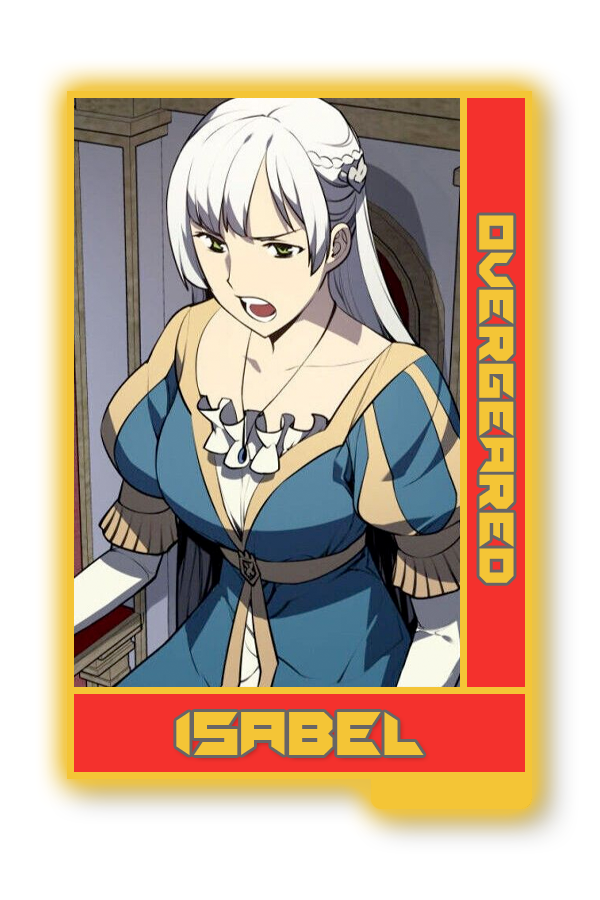
<style>
.page{position:relative;width:600px;height:900px;background:#ffffff}
.page>*{position:absolute;margin:0}
.t1{font:48.8px "Suggested-Regular";color:#f4c536}
.t2{font:62.5px "Suggested-Regular";color:#f4c536}
</style>
<div class="page">
<p class="t1" style="left:479px;top:215px;width:35px;height:368px;rotate:90deg">OVERGEARED</p>
<p class="t2" style="left:176px;top:712px;width:248px;height:43px">ISABEL</p>
</div>
